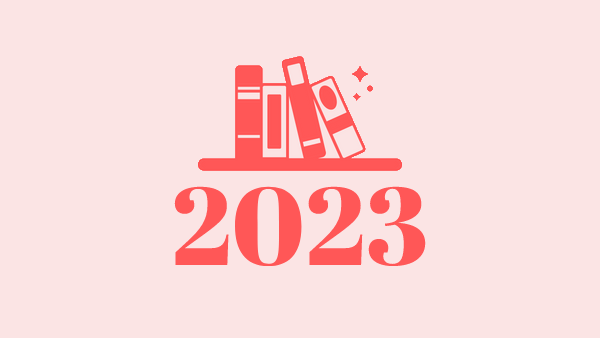
<style>
.page{position:relative;width:600px;height:338px;background:#fbe4e4}
.page>*{position:absolute;margin:0}
.t1{font:110px "AbrilFatface-Regular";color:#ff5757}
</style>
<div class="page">
<p class="t1" style="left:174px;top:186px;width:252px;height:81px">2023</p>
</div>
